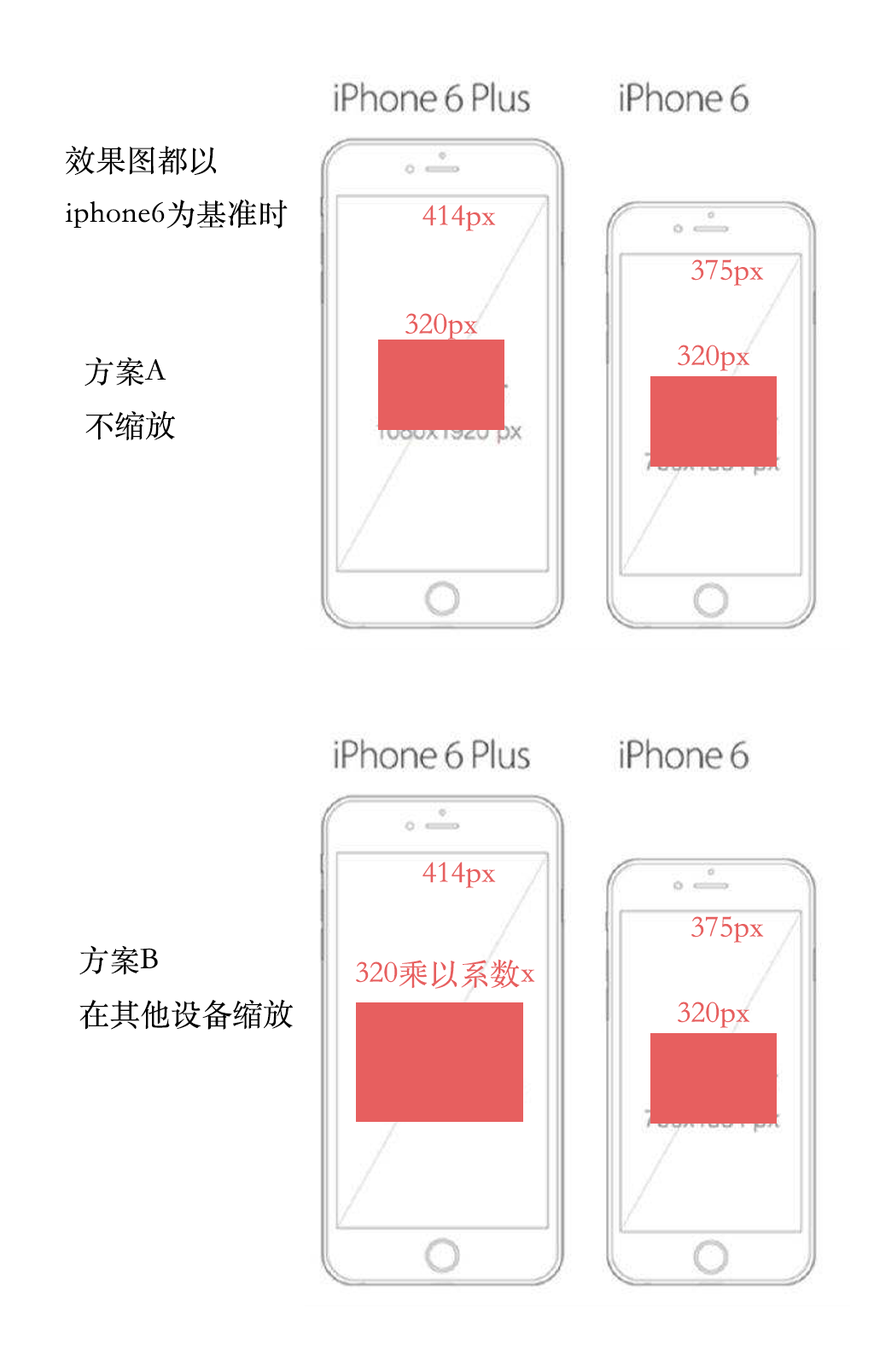
<style>
.page{position:relative;width:874px;height:1365px;background:#ffffff}
.page>*{position:absolute;margin:0}
.t1{font:30.7px "STSongti-TC-Regular";color:#000000}
.t2{font:30.7px "STSongti-TC-Regular";color:#e75f5f}
</style>
<div class="page">
<p class="t1" style="left:65px;top:146px;width:222px;height:83px">效果图都以<br>iphone6为基准时</p>
<p class="t2" style="left:422px;top:205px;width:74px;height:26px">414px</p>
<p class="t2" style="left:691px;top:259px;width:73px;height:27px">375px</p>
<p class="t2" style="left:405px;top:313px;width:73px;height:27px">320px</p>
<p class="t2" style="left:677px;top:345px;width:73px;height:26px">320px</p>
<p class="t1" style="left:84px;top:357px;width:91px;height:84px">方案A <br>不缩放</p>
<p class="t2" style="left:422px;top:862px;width:74px;height:26px">414px</p>
<p class="t2" style="left:691px;top:916px;width:73px;height:27px">375px</p>
<p class="t1" style="left:79px;top:945px;width:214px;height:85px">方案B <br>在其他设备缩放</p>
<p class="t2" style="left:356px;top:959px;width:179px;height:30px">320乘以系数x</p>
<p class="t2" style="left:677px;top:1002px;width:73px;height:26px">320px</p>
</div>
